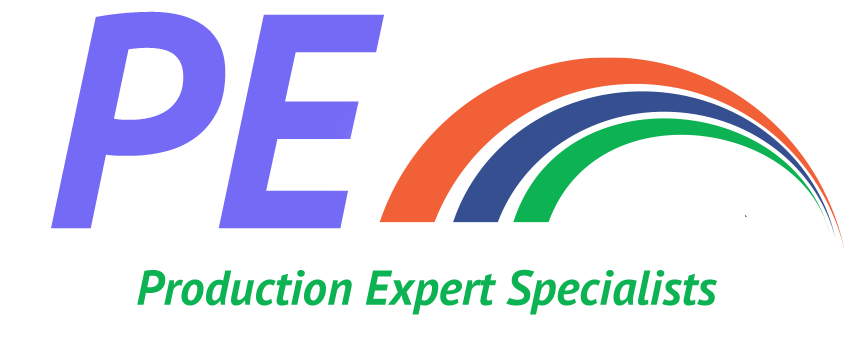
<style>
.page{position:relative;width:854px;height:354px;background:#ffffff}
.page>*{position:absolute;margin:0}
.t1{font:49px "PTSans-BoldItalic";color:#0db353}
</style>
<div class="page">
<p class="t1" style="left:137px;top:269px;width:580px;height:46px">Production Expert Specialists</p>
</div>
